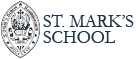
<style>
.page{position:relative;width:136px;height:59px;background:#ffffff}
.page>*{position:absolute;margin:0}
.t1{font:18px/16px "Garamond";color:#20354b}
</style>
<div class="page">
<p class="t1" style="left:43px;top:14px;width:91px;height:29px">ST. MARK’S<br>SCHOOL</p>
</div>
